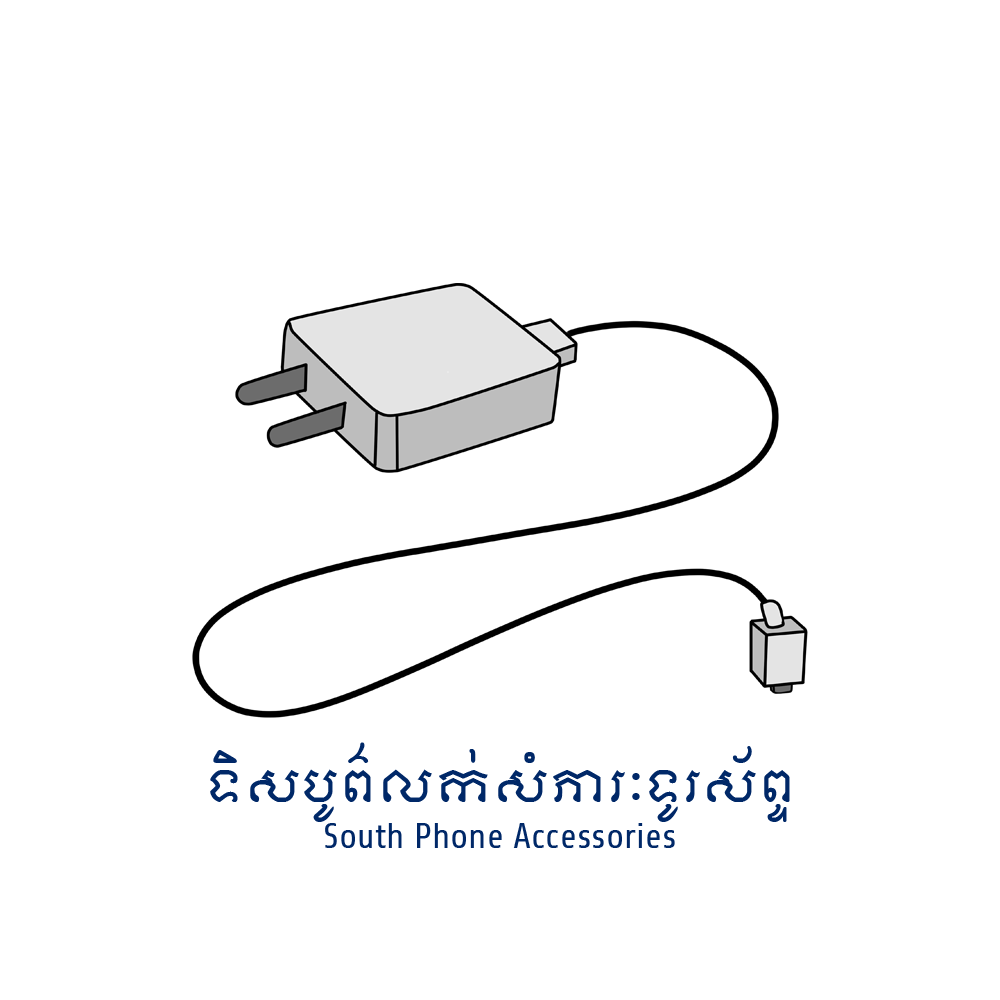
<style>
.page{position:relative;width:1000px;height:1000px;background:#ffffff}
.page>*{position:absolute;margin:0}
.t1{font:43.4px "Moulpali-Regular";color:#002868}
.t2{font:36px "Moulpali-Regular";color:#002868}
</style>
<div class="page">
<p class="t1" style="left:210px;top:742px;width:580px;height:80px;text-align:right">ទិសបូព៌លក់សំភារៈទូរស័ព្ទ</p>
<p class="t2" style="left:325px;top:823px;width:350px;height:25px">South Phone Accessories</p>
</div>
